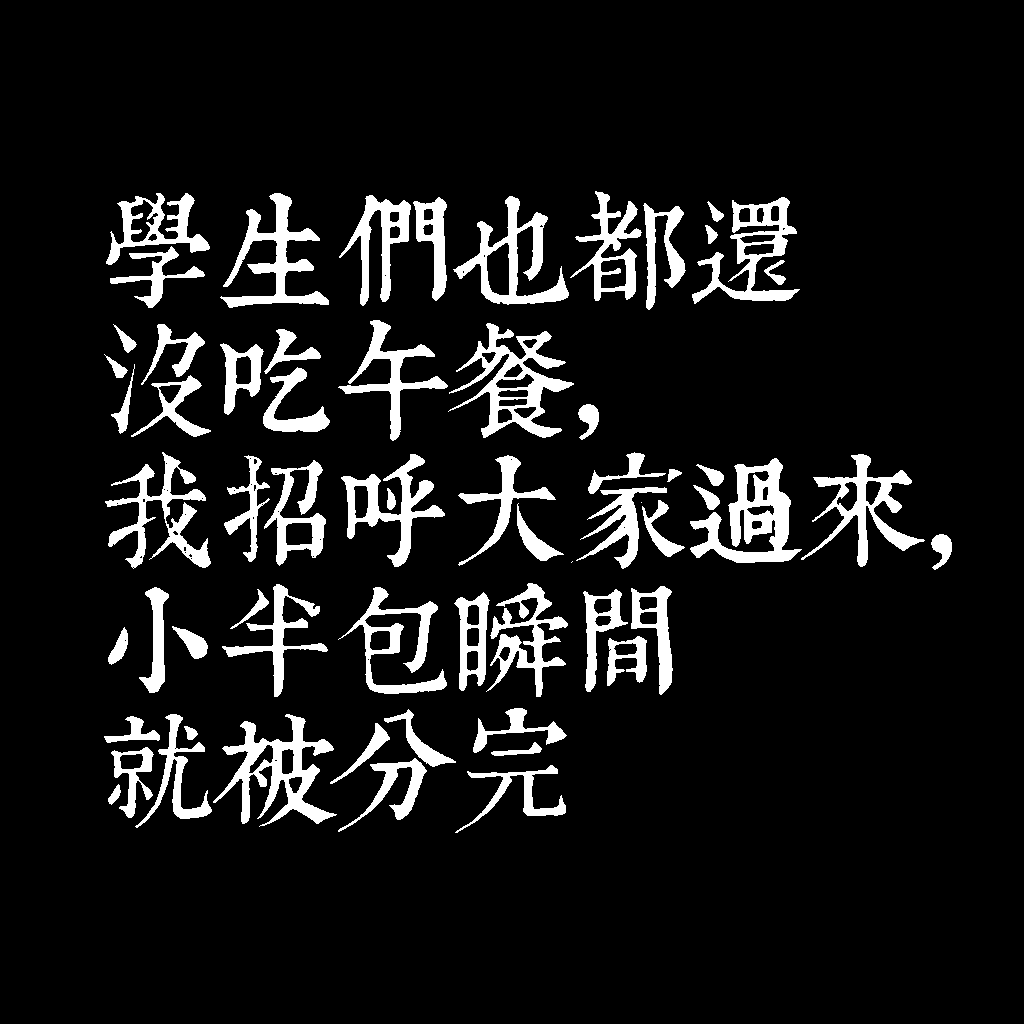
<style>
.page{position:relative;width:1024px;height:1024px;background:#000000}
.page>*{position:absolute;margin:0}
.t1{font:120px/130px "TpldKhangXiDictTrial";letter-spacing:-0.02em;color:#ffffff}
</style>
<div class="page">
<p class="t1" style="left:104px;top:191px;width:848px;height:642px">學生們也都還<br>沒吃午餐，<br>我招呼大家過來，<br>小半包瞬間<br>就被分完</p>
</div>
